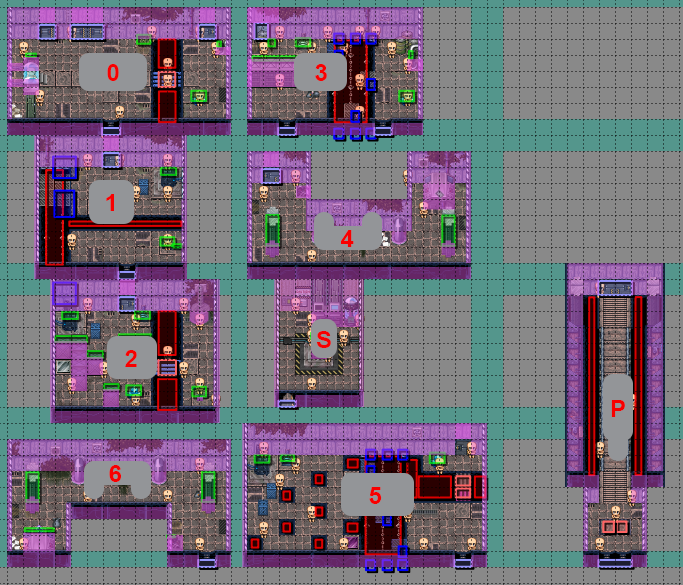
<style>
.page{position:relative;width:683px;height:585px;background:#898989}
.page>*{position:absolute;margin:0}
.t1{font:24px "Arial-BoldMT";color:#f80000}
</style>
<div class="page">
<p class="t1" style="left:107px;top:64px;width:12px;height:17px">0</p>
<p class="t1" style="left:315px;top:64px;width:12px;height:17px">3</p>
<p class="t1" style="left:106px;top:194px;width:8px;height:17px">1</p>
<p class="t1" style="left:341px;top:230px;width:13px;height:17px">4</p>
<p class="t1" style="left:316px;top:331px;width:15px;height:17px">S</p>
<p class="t1" style="left:125px;top:350px;width:12px;height:17px">2</p>
<p class="t1" style="left:611px;top:400px;width:14px;height:17px">P</p>
<p class="t1" style="left:109px;top:465px;width:12px;height:17px">6</p>
<p class="t1" style="left:369px;top:487px;width:13px;height:17px">5</p>
</div>
